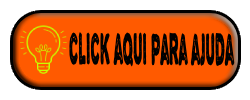
<style>
.page{position:relative;width:250px;height:100px;background:#ff5a00}
.page>*{position:absolute;margin:0}
.t1{font:48.3px "AlphaEcho";color:#000000;scale:0.31 1}
</style>
<div class="page">
<p class="t1" style="left:69px;top:32px;width:166px;height:35px">click aqui para ajuda</p>
</div>
